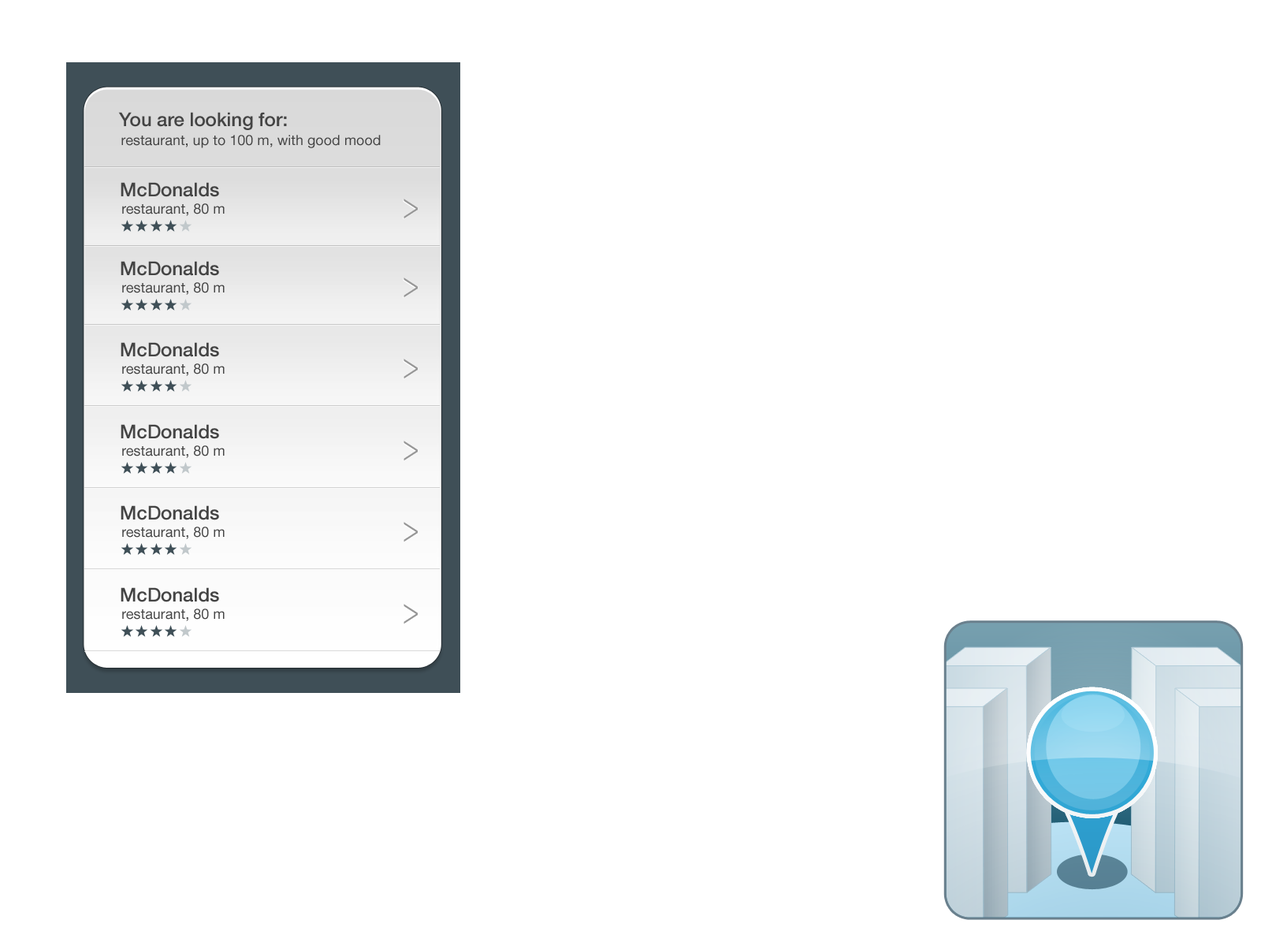
<style>
.page{position:relative;width:1261px;height:946px;background:#ffffff}
.page>*{position:absolute;margin:0}
.t1{font:18.9px "HelveticaNeue-Medium";color:#444444}
.t2{font:14.2px "HelveticaNeue";color:#444444}
.t3{font:37.8px "HelveticaNeue-Light";color:#969696;scale:0.71 1}
</style>
<div class="page">
<p class="t1" style="left:118px;top:112px;width:169px;height:18px">You are looking for:</p>
<p class="t2" style="left:121px;top:135px;width:260px;height:13px">restaurant, up to 100 m, with good mood</p>
<p class="t1" style="left:121px;top:182px;width:98px;height:15px">McDonalds</p>
<p class="t2" style="left:122px;top:203px;width:103px;height:13px">restaurant, 80 m</p>
<p class="t3" style="left:403px;top:199px;width:15px;height:20px">&gt;</p>
<p class="t1" style="left:121px;top:261px;width:98px;height:15px">McDonalds</p>
<p class="t3" style="left:403px;top:277px;width:15px;height:21px">&gt;</p>
<p class="t2" style="left:122px;top:282px;width:103px;height:13px">restaurant, 80 m</p>
<p class="t1" style="left:121px;top:342px;width:98px;height:15px">McDonalds</p>
<p class="t2" style="left:122px;top:363px;width:103px;height:13px">restaurant, 80 m</p>
<p class="t3" style="left:403px;top:359px;width:15px;height:20px">&gt;</p>
<p class="t1" style="left:121px;top:424px;width:98px;height:15px">McDonalds</p>
<p class="t2" style="left:122px;top:445px;width:103px;height:13px">restaurant, 80 m</p>
<p class="t3" style="left:403px;top:441px;width:15px;height:20px">&gt;</p>
<p class="t1" style="left:121px;top:505px;width:98px;height:15px">McDonalds</p>
<p class="t3" style="left:403px;top:522px;width:15px;height:20px">&gt;</p>
<p class="t2" style="left:122px;top:526px;width:103px;height:13px">restaurant, 80 m</p>
<p class="t1" style="left:121px;top:587px;width:98px;height:15px">McDonalds</p>
<p class="t3" style="left:403px;top:604px;width:15px;height:20px">&gt;</p>
<p class="t2" style="left:122px;top:608px;width:103px;height:13px">restaurant, 80 m</p>
</div>
